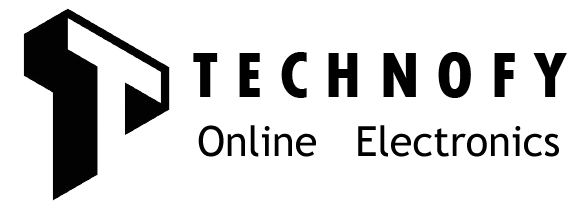
<style>
.page{position:relative;width:581px;height:217px;background:#ffffff}
.page>*{position:absolute;margin:0}
.t1{font:66.7px "TwCenMT-CondensedExtraBold";color:#000000}
.t2{font:41.7px "TrebuchetMS";color:#000000}
</style>
<div class="page">
<p class="t1" style="left:193px;top:52px;width:374px;height:46px">T E C H N O F Y</p>
<p class="t2" style="left:198px;top:125px;width:361px;height:32px">Online   Electronics</p>
</div>
